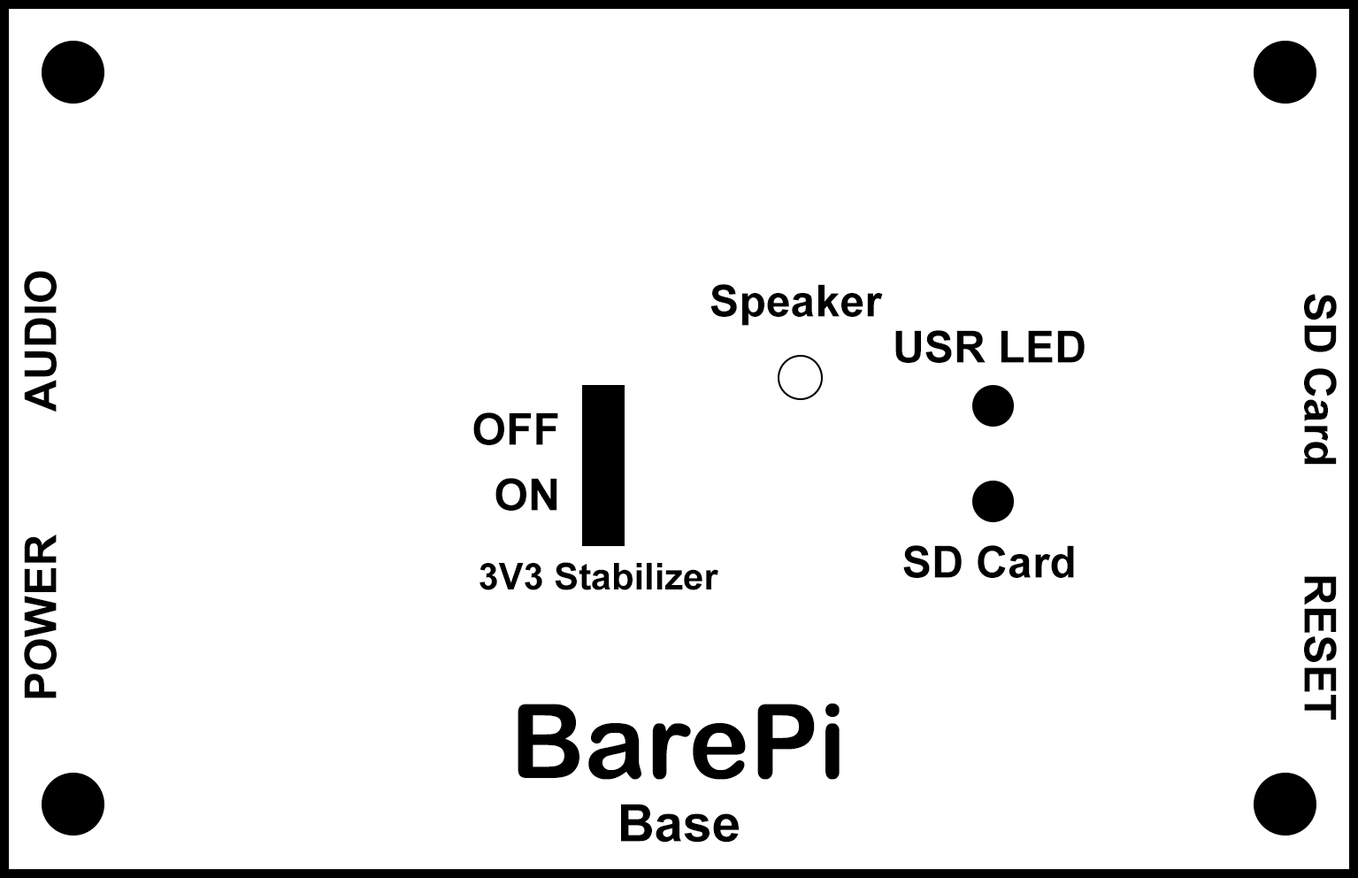
<style>
.page{position:relative;width:1358px;height:878px;background:#ffffff}
.page>*{position:absolute;margin:0}
.t1{font:44.2px "Arial-BoldMT";color:#000000}
.t2{font:36.9px "Arial-BoldMT";color:#000000}
.t3{font:103.2px "ArialRoundedMTBold";color:#000000}
.t4{font:51.6px "Arial-BoldMT";color:#000000}
</style>
<div class="page">
<p class="t1" style="left:24px;top:271px;width:33px;height:141px;rotate:-90deg">AUDIO</p>
<p class="t1" style="left:711px;top:284px;width:172px;height:42px">Speaker</p>
<p class="t1" style="left:1304px;top:294px;width:33px;height:171px;rotate:90deg">SD Card</p>
<p class="t1" style="left:896px;top:330px;width:189px;height:33px">USR LED</p>
<p class="t1" style="left:473px;top:412px;width:85px;height:33px">OFF</p>
<p class="t1" style="left:496px;top:478px;width:62px;height:33px">ON</p>
<p class="t1" style="left:24px;top:534px;width:33px;height:164px;rotate:-90deg">POWER</p>
<p class="t1" style="left:904px;top:545px;width:170px;height:33px">SD Card</p>
<p class="t2" style="left:480px;top:562px;width:239px;height:28px">3V3 Stabilizer</p>
<p class="t1" style="left:1304px;top:576px;width:33px;height:144px;rotate:90deg">RESET</p>
<p class="t3" style="left:518px;top:703px;width:322px;height:77px">BarePi</p>
<p class="t4" style="left:621px;top:804px;width:118px;height:38px">Base</p>
</div>
